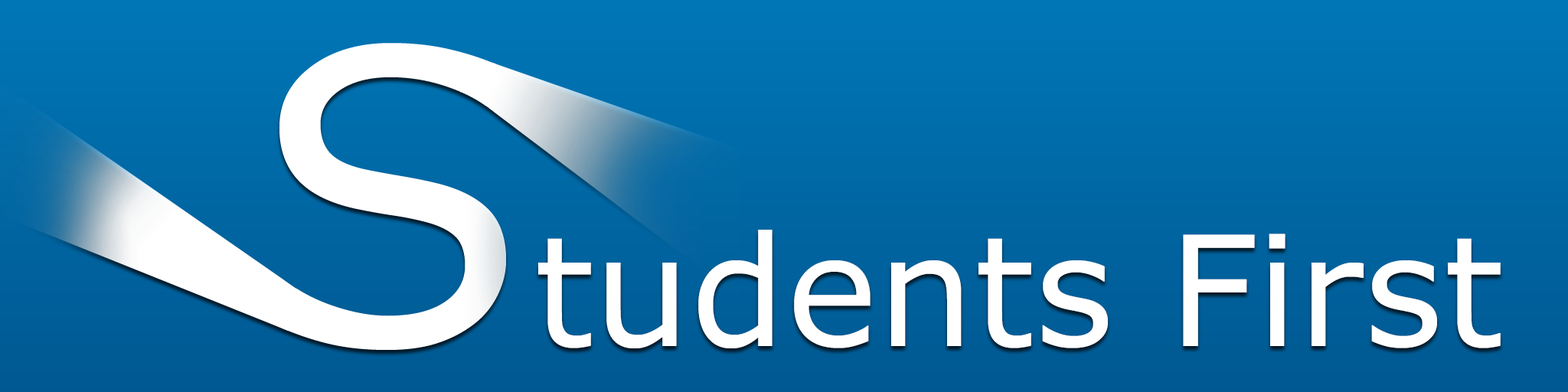
<style>
.page{position:relative;width:1568px;height:392px}
.page>*{position:absolute;margin:0}
.t1{font:153.1px "Verdana";color:#ffffff}
</style>
<div class="page">
<p class="t1" style="left:538px;top:230px;width:963px;height:118px">tudents First</p>
</div>
